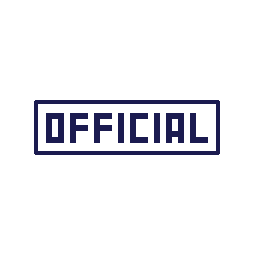
<style>
.page{position:relative;width:256px;height:256px;background:#ffffff}
.page>*{position:absolute;margin:0}
.t1{font:48px "04b24";color:#1b1b50}
</style>
<div class="page">
<p class="t1" style="left:46px;top:113px;width:162px;height:30px">OFFICIAL</p>
</div>
